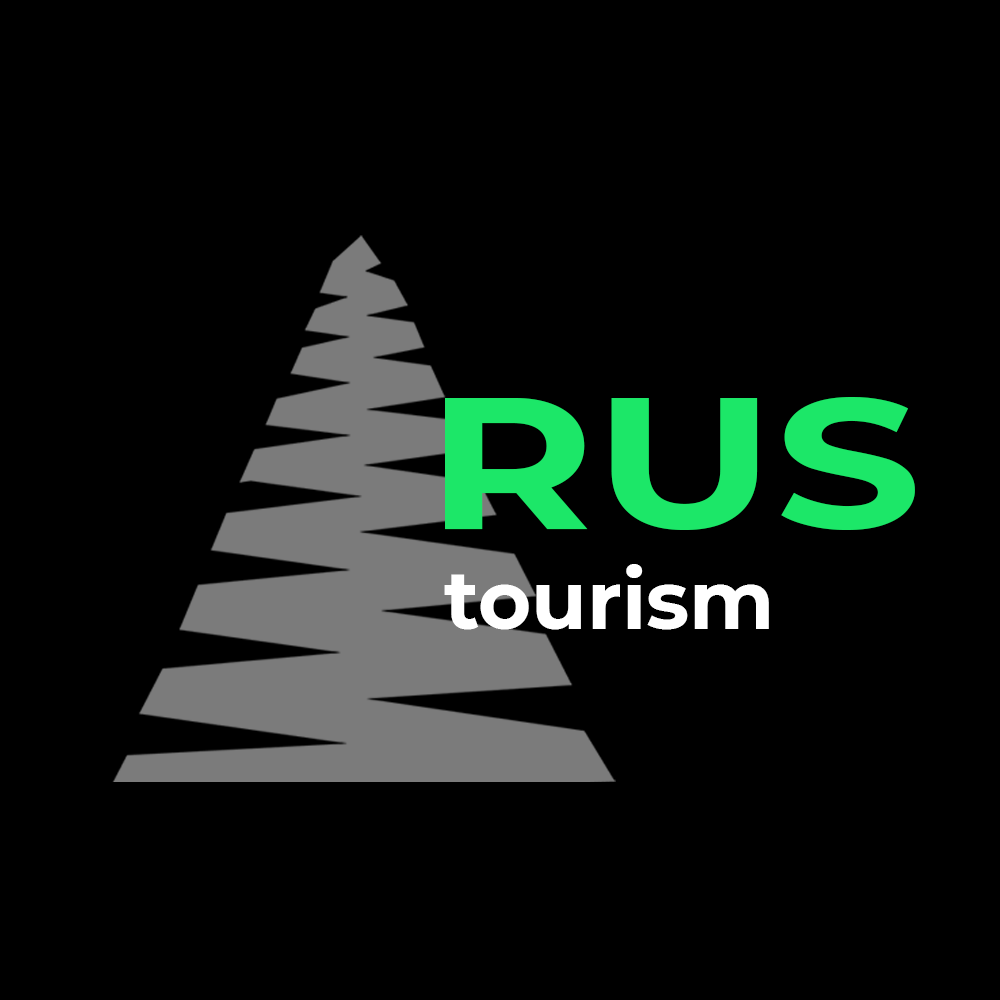
<style>
.page{position:relative;width:1000px;height:1000px;background:#000000}
.page>*{position:absolute;margin:0}
.t1{font:186.4px "Montserrat-Bold";color:#1ce768;scale:1.23 1}
.t2{font:81.3px "Montserrat-Bold";color:#ffffff}
</style>
<div class="page">
<p class="t1" style="left:445px;top:397px;width:470px;height:133px">RUS</p>
<p class="t2" style="left:444px;top:564px;width:325px;height:66px">tourism</p>
</div>
